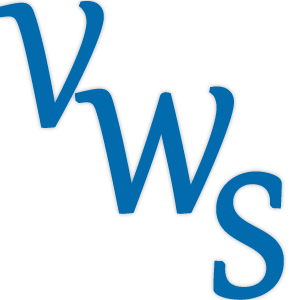
<style>
.page{position:relative;width:300px;height:300px;background:#ffffff}
.page>*{position:absolute;margin:0}
.t1{font:208.3px "Gabriola";color:#016bae;text-transform:uppercase;font-weight:bold}
</style>
<div class="page">
<p class="t1" style="left:75px;top:86px;width:159px;height:128px">w</p>
<p class="t1" style="left:213px;top:171px;width:71px;height:129px">s</p>
</div>
